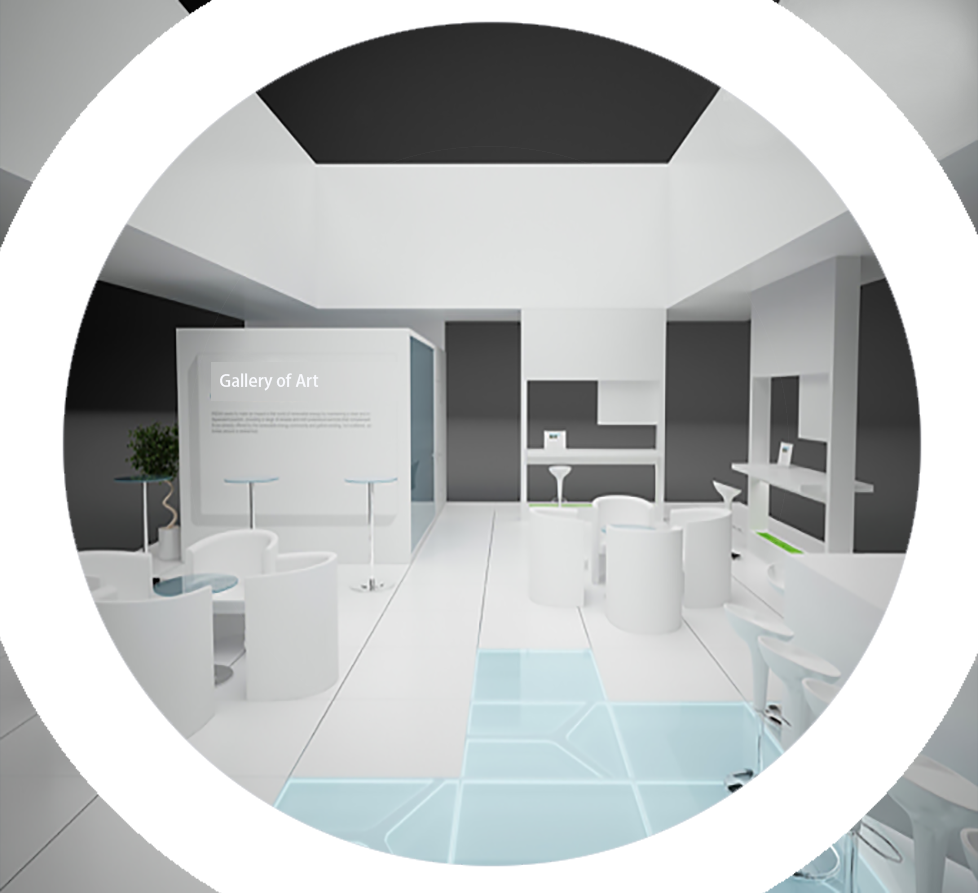
<style>
.page{position:relative;width:978px;height:893px;background:#ffffff}
.page>*{position:absolute;margin:0}
.t1{font:16.7px "AdobeHeitiStd-Regular";color:#f8f9fd}
</style>
<div class="page">
<p class="t1" style="left:220px;top:373px;width:99px;height:18px">Gallery of Art</p>
</div>
